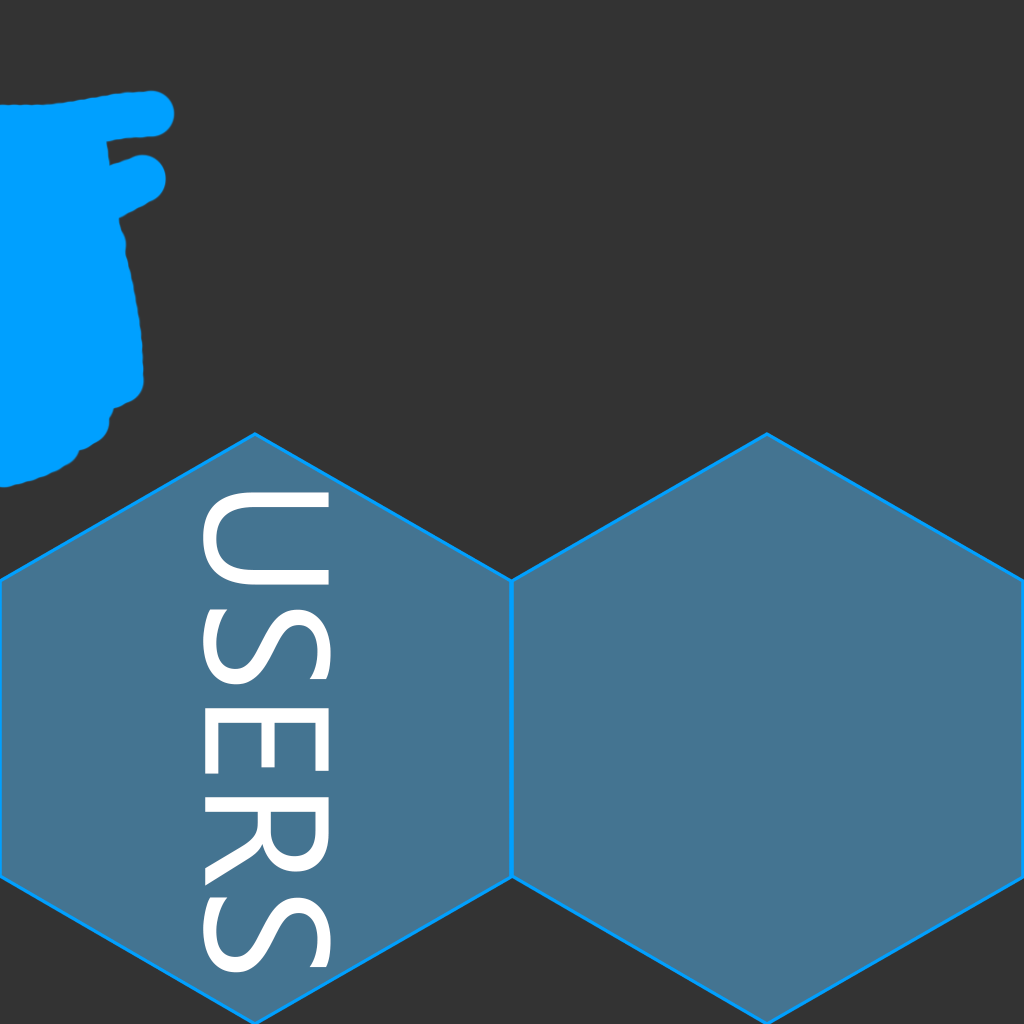
<style>
.page{position:relative;width:1024px;height:1024px;background:#333333}
.page>*{position:absolute;margin:0}
.t1{font:176px "SegoeUI";color:#ffffff}
</style>
<div class="page">
<p class="t1" style="left:203px;top:492px;width:128px;height:481px;rotate:90deg">USERS</p>
</div>
